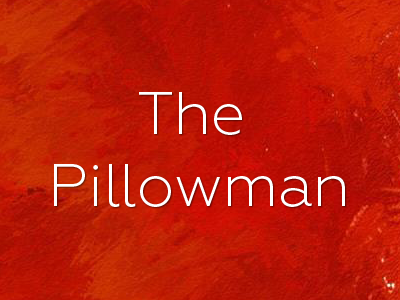
<style>
.page{position:relative;width:400px;height:300px}
.page>*{position:absolute;margin:0}
.t1{font:60px "Geometria-Light";color:#ffffff}
</style>
<div class="page">
<p class="t1" style="left:54px;top:92px;width:291px;height:115px;text-align:center">The <br>Pillowman</p>
</div>
